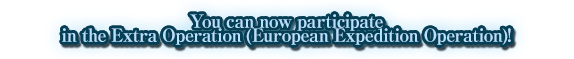
<style>
.page{position:relative;width:574px;height:59px;background:#ffffff}
.page>*{position:absolute;margin:0}
.t1{font:18px/14px "RyuminPro-ExBold";letter-spacing:-0.04em;color:#b9e0ff}
</style>
<div class="page">
<p class="t1" style="left:62px;top:14px;width:449px;height:31px;text-align:center">You can now participate<br>in the Extra Operation (European Expedition Operation)!</p>
</div>
